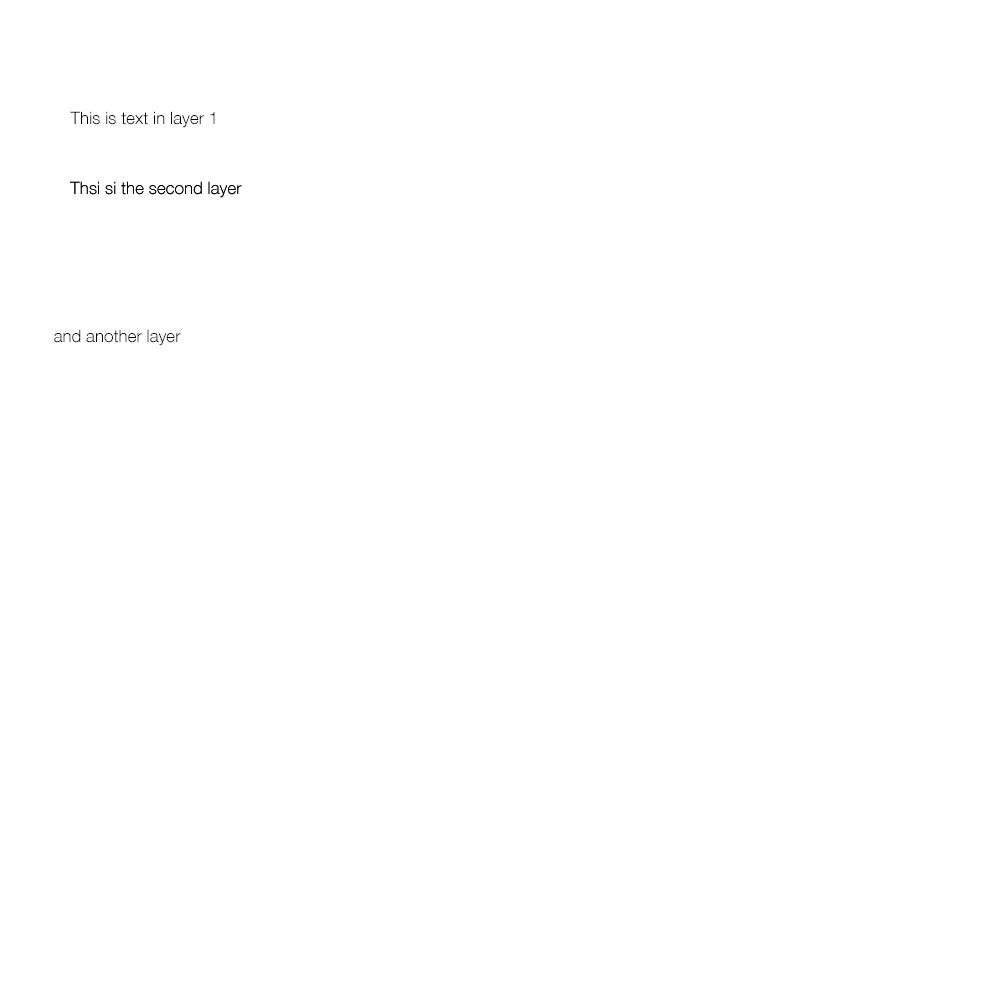
<style>
.page{position:relative;width:1000px;height:1000px;background:#ffffff}
.page>*{position:absolute;margin:0}
.t1{font:17px "HelveticaNeue-Light";color:#000000}
</style>
<div class="page">
<p class="t1" style="left:70px;top:111px;width:145px;height:17px">This is text in layer 1</p>
<p class="t1" style="left:70px;top:181px;width:172px;height:17px">Thsi si the second layer</p>
<p class="t1" style="left:70px;top:181px;width:172px;height:17px">Thsi si the second layer</p>
<p class="t1" style="left:54px;top:329px;width:127px;height:17px">and another layer</p>
</div>
